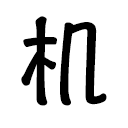
<style>
.page{position:relative;width:128px;height:128px;background:#ffffff}
.page>*{position:absolute;margin:0}
.t1{font:96px "HannotateSC-W7";color:#000000}
</style>
<div class="page">
<p class="t1" style="left:21px;top:16px;width:86px;height:90px">机</p>
</div>
